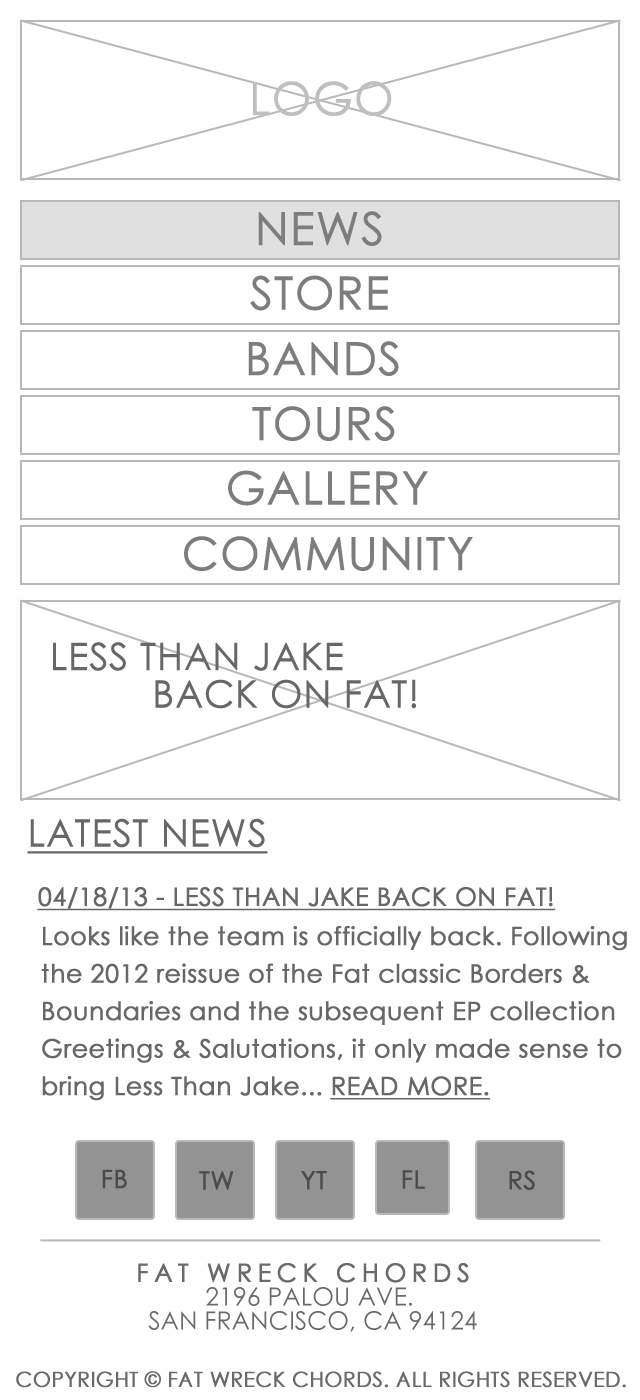
<style>
.page{position:relative;width:640px;height:1400px;background:#ffffff}
.page>*{position:absolute;margin:0}
.t1{font:45.8px "CenturyGothic";color:#bfbfbf;text-transform:uppercase;font-weight:bold}
.t2{font:45.8px "CenturyGothic";color:#7d7d7d;text-transform:uppercase;font-weight:bold}
.t3{font:37.5px/37.5px "CenturyGothic";color:#676767;text-transform:uppercase;font-weight:bold}
.t4{font:37.5px "CenturyGothic";color:#676767;text-transform:uppercase;font-weight:bold;text-decoration:underline}
.t5{font:25px "CenturyGothic";color:#676767;text-transform:uppercase;font-weight:bold;text-decoration:underline}
.t6{font:25px/33.3px "CenturyGothic";color:#676767;font-weight:bold}
.t7{font:25px/33.3px "CenturyGothic";color:#676767;text-transform:uppercase;font-weight:bold;text-decoration:underline}
.t8{font:25px "CenturyGothic";color:#4c4c4c;text-transform:uppercase;font-weight:bold}
.t9{font:25px/24px "CenturyGothic";color:#6a6a6a;text-transform:uppercase}
.t10{font:25px/24px "CenturyGothic";letter-spacing:0.2em;color:#6a6a6a;text-transform:uppercase;font-weight:bold}
.t11{font:20.8px "CenturyGothic";color:#6a6a6a;text-transform:uppercase;font-weight:bold}
</style>
<div class="page">
<p class="t1" style="left:253px;top:81px;width:139px;height:35px">logo</p>
<p class="t2" style="left:258px;top:211px;width:124px;height:35px">news</p>
<p class="t2" style="left:250px;top:275px;width:138px;height:36px">store</p>
<p class="t2" style="left:248px;top:341px;width:151px;height:35px">bands</p>
<p class="t2" style="left:252px;top:406px;width:143px;height:35px">tours</p>
<p class="t2" style="left:228px;top:470px;width:200px;height:36px">gallery</p>
<p class="t2" style="left:184px;top:536px;width:289px;height:35px">community</p>
<p class="t3" style="left:53px;top:642px;width:363px;height:67px">Less than Jake<br>         back on fat!</p>
<p class="t4" style="left:27px;top:818px;width:241px;height:36px">latest news</p>
<p class="t5" style="left:37px;top:887px;width:519px;height:24px">04/18/13 - Less Than Jake back on FAT!</p>
<p class="t6" style="left:41px;top:926px;width:586px;height:175px">Looks like the team is officially back. Following <br>the 2012 reissue of the Fat classic Borders &amp; <br>Boundaries and the subsequent EP collection <br>Greetings &amp; Salutations, it only made sense to <br>bring Less Than Jake... <span class="t7">read more.</span></p>
<p class="t8" style="left:102px;top:1169px;width:25px;height:20px">FB</p>
<p class="t8" style="left:199px;top:1171px;width:35px;height:19px">TW</p>
<p class="t8" style="left:301px;top:1171px;width:26px;height:19px">YT</p>
<p class="t8" style="left:402px;top:1170px;width:23px;height:19px">FL</p>
<p class="t8" style="left:509px;top:1170px;width:26px;height:20px">RS</p>
<p class="t9" style="left:138px;top:1263px;width:339px;height:69px;text-align:center"><span class="t10">FAT WRECK CHORDS  <br></span>2196 Palou Ave. <br>San Francisco, CA 94124</p>
<p class="t11" style="left:16px;top:1371px;width:610px;height:17px">Copyright © Fat Wreck Chords. All rights reserved.</p>
</div>
